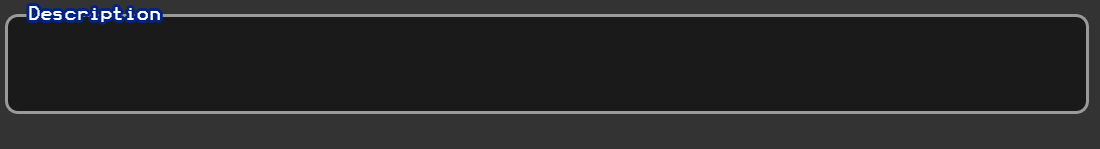
<style>
.page{position:relative;width:1100px;height:149px;background:#1a1a1a}
.page>*{position:absolute;margin:0}
.t1{font:16px "Terminal";color:#ffffff}
</style>
<div class="page">
<p class="t1" style="left:29px;top:6px;width:131px;height:16px">Description</p>
</div>
